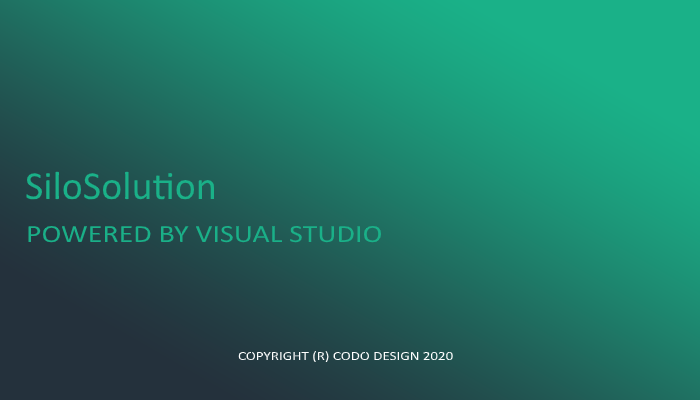
<style>
.page{position:relative;width:700px;height:400px}
.page>*{position:absolute;margin:0}
.t1{font:40px "Calibri";color:#1ab188}
.t2{font:25px "Calibri";color:#1ab088;scale:1.2 1}
.t3{font:12.5px "Calibri";color:#ffffff;scale:1.2 1}
</style>
<div class="page">
<p class="t1" style="left:26px;top:171px;width:189px;height:29px">SiloSolution</p>
<p class="t2" style="left:28px;top:225px;width:354px;height:18px">POWERED BY VISUAL STUDIO</p>
<p class="t3" style="left:238px;top:351px;width:215px;height:12px">COPYRIGHT (R) CODO DESIGN 2020</p>
</div>
